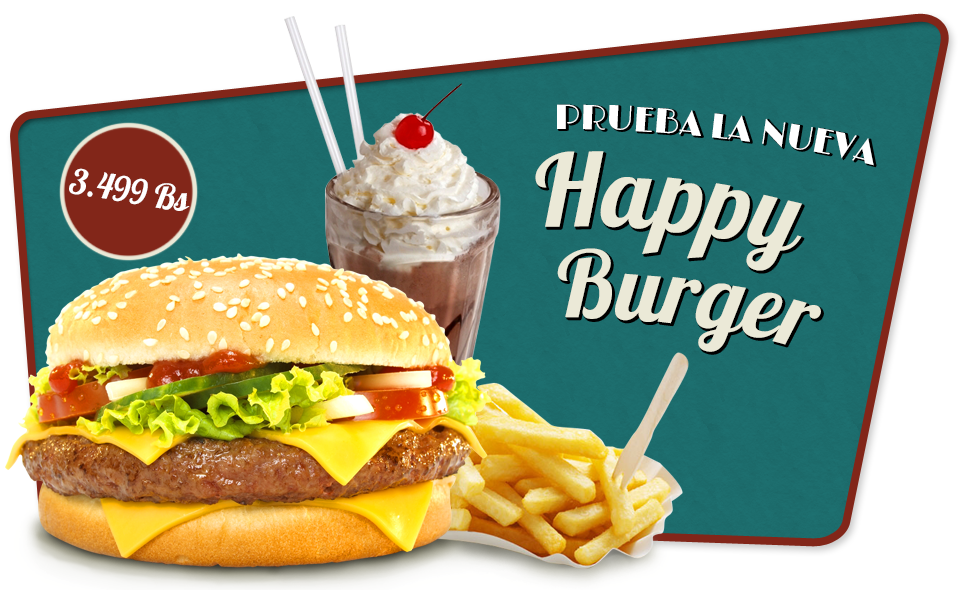
<style>
.page{position:relative;width:960px;height:590px}
.page>*{position:absolute;margin:0}
.t1{font:35px "Limelight";color:#ffffff}
.t2{font:100px "Lobster";color:#ebe9d7}
.t3{font:35px "Lobster";color:#ffffff}
.t4{font:92px "Lobster";color:#ebe9d7}
</style>
<div class="page">
<p class="t1" style="left:557px;top:104px;width:317px;height:62px;text-align:center">PRUEBA LA NUEVA</p>
<p class="t2" style="left:535px;top:151px;width:267px;height:120px;rotate:-4deg">Happy</p>
<p class="t3" style="left:69px;top:168px;width:121px;height:43px;rotate:9deg">3.499 Bs</p>
<p class="t4" style="left:557px;top:248px;width:264px;height:104px">Burger</p>
</div>
